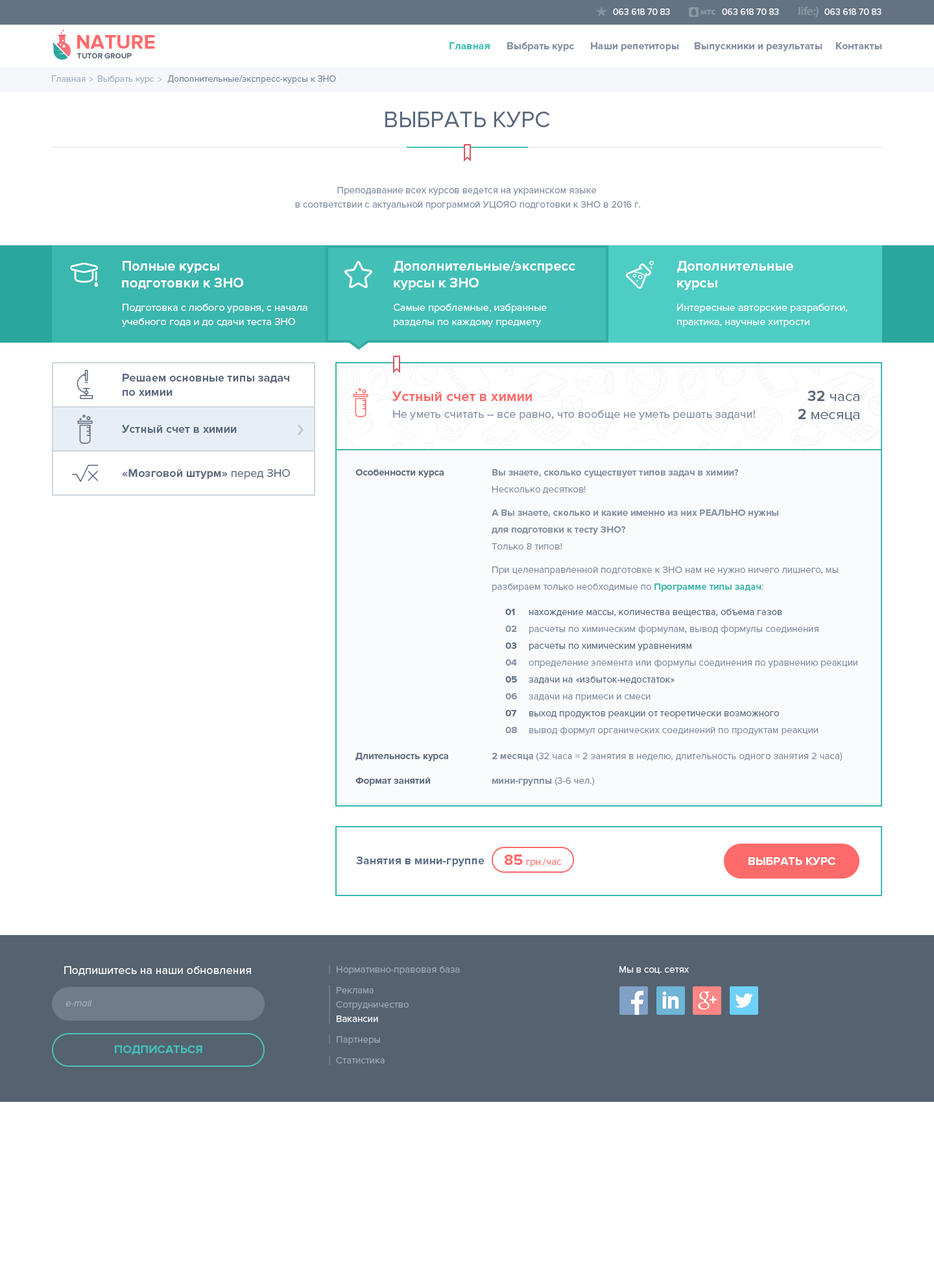
<style>
.page{position:relative;width:934px;height:1277px;background:#ffffff}
.page>*{position:absolute;margin:0}
.t1{font:9.1px "ProximaNova-Regular";color:#ffffff}
.t2{font:20.1px "ProximaNova-Bold";color:#ff6b6b}
.t3{font:7.8px "ProximaNova-Semibold";color:#556270;text-transform:uppercase}
.t4{font:10.4px "ProximaNova-Bold";color:#42c0b7}
.t5{font:10.4px "ProximaNova-Bold";color:#828fa2}
.t6{font:9.1px "ProximaNova-Regular";color:#a8b5c4}
.t7{font:9.1px "ProximaNova-Regular";color:#7d8c9c}
.t8{font:23.4px "ProximaNova-Regular";color:#5a687c;text-transform:uppercase}
.t9{font:9.7px/14.3px "ProximaNova-Regular";color:#828fa2}
.t10{font:14.3px/16.9px "ProximaNova-Bold";color:#ffffff}
.t11{font:10.4px/14.3px "ProximaNova-Regular";color:#ffffff}
.t12{font:11.7px/14.3px "ProximaNova-Bold";color:#5a687c}
.t13{font:11.7px/16.9px "ProximaNova-Regular";color:#828fa2}
.t14{font:14.3px/14.3px "ProximaNova-Bold";color:#ff6b6b}
.t15{font:14.9px "ProximaNova-Regular";color:#5a687c}
.t16{font:14.9px "ProximaNova-Bold";color:#5a687c}
.t17{font:11.7px "ProximaNova-Bold";color:#5a687c}
.t18{font:11.7px "ProximaNova-Regular";color:#5a687c}
.t19{font:9.7px "ProximaNova-Bold";color:#5a687c}
.t20{font:9.7px/23.4px "ProximaNova-Regular";color:#828fa2}
.t21{font:9.7px/16.9px "ProximaNova-Bold";color:#828fa2}
.t22{font:9.7px/16.9px "ProximaNova-Regular";color:#828fa2}
.t23{font:9.7px/23.4px "ProximaNova-Bold";color:#828fa2}
.t24{font:9.7px/16.9px "ProximaNova-Bold";color:#3ab7ae}
.t25{font:9.7px/16.9px "ProximaNova-Bold";color:#556883}
.t26{font:9.7px/16.9px "ProximaNova-Regular";color:#556883}
.t27{font:9.7px "ProximaNova-Regular";color:#828fa2}
.t28{font:9.7px "ProximaNova-Bold";color:#828fa2}
.t29{font:11.7px "ProximaNova-Bold";color:#596c86}
.t30{font:9.7px "ProximaNova-Regular";color:#ff6b6b}
.t31{font:15.6px "ProximaNova-Bold";color:#ff6b6b}
.t32{font:11.7px "ProximaNova-Bold";color:#ffffff}
.t33{font:11.7px "ProximaNova-Regular";color:#ffffff}
.t34{font:9.7px/14.3px "ProximaNova-Regular";color:#9ba9b8}
.t35{font:9.7px/20.8px "ProximaNova-Regular";color:#9ba9b8}
.t36{font:9.7px/14.3px "ProximaNova-Regular";color:#fefeff}
.t37{font:9.7px "ProximaNova-Regular";color:#ffffff}
.t38{font:9.7px "ProximaNova-RegularIt";color:#9faebe}
.t39{font:11.7px "ProximaNova-Bold";color:#42c0b7;text-transform:uppercase}
</style>
<div class="page">
<p class="t1" style="left:613px;top:8px;width:57px;height:7px">063 618 70 83</p>
<p class="t1" style="left:722px;top:8px;width:57px;height:7px">063 618 70 83</p>
<p class="t1" style="left:824px;top:8px;width:58px;height:7px">063 618 70 83</p>
<p class="t2" style="left:77px;top:35px;width:78px;height:14px">NATURE</p>
<p class="t3" style="left:77px;top:53px;width:55px;height:5px">Tutor group</p>
<p class="t4" style="left:450px;top:42px;width:40px;height:7px">Главная</p>
<p class="t5" style="left:507px;top:42px;width:67px;height:9px">Выбрать курс</p>
<p class="t5" style="left:591px;top:42px;width:88px;height:9px">Наши репетиторы</p>
<p class="t5" style="left:695px;top:42px;width:128px;height:9px">Выпускники и результаты</p>
<p class="t5" style="left:836px;top:42px;width:46px;height:7px">Контакты</p>
<p class="t6" style="left:52px;top:75px;width:34px;height:7px">Главная</p>
<p class="t6" style="left:98px;top:75px;width:56px;height:9px">Выбрать курс</p>
<p class="t7" style="left:167px;top:75px;width:169px;height:9px">Дополнительные/экспресс-курсы к ЗНО</p>
<p class="t8" style="left:385px;top:112px;width:165px;height:15px">Выбрать куpс</p>
<p class="t9" style="left:295px;top:187px;width:345px;height:23px;text-align:center">Преподавание всех курсов ведется на украинском языке<br> в соответствии с актуальной программой УЦОЯО подготовки к ЗНО в 2016 г.</p>
<p class="t10" style="left:122px;top:261px;width:121px;height:28px">Полные курсы <br>подготовки к ЗНО</p>
<p class="t10" style="left:394px;top:261px;width:181px;height:29px">Дополнительные/экспресс<br>курсы к ЗНО</p>
<p class="t10" style="left:677px;top:261px;width:116px;height:29px">Дополнительные <br>курсы</p>
<p class="t11" style="left:122px;top:304px;width:185px;height:23px">Подготовка с любого уровня, с начала <br>учебного года и до сдачи теста ЗНО</p>
<p class="t11" style="left:394px;top:304px;width:153px;height:23px">Cамые проблемные, избранные <br>разделы по каждому предмету</p>
<p class="t11" style="left:677px;top:304px;width:171px;height:23px">Интересные авторские разработки, <br>практика, научные хитрости</p>
<p class="t12" style="left:123px;top:374px;width:166px;height:22px">Решаем основные типы задач <br>по химии</p>
<p class="t13" style="left:392px;top:391px;width:363px;height:29px"><span class="t14">Устный счет в химии<br></span>Не уметь считать – все равно, что вообще не уметь решать задачи!</p>
<p class="t15" style="left:808px;top:390px;width:51px;height:11px"><span class="t16">32 </span>часа</p>
<p class="t15" style="left:798px;top:409px;width:61px;height:12px"><span class="t16">2 </span>месяца</p>
<p class="t17" style="left:122px;top:425px;width:115px;height:8px">Устный счет в химии</p>
<p class="t17" style="left:122px;top:469px;width:168px;height:10px">«Мозговой штурм» <span class="t18">перед ЗНО</span></p>
<p class="t19" style="left:355px;top:469px;width:89px;height:8px">Особенности курса</p>
<p class="t20" style="left:492px;top:469px;width:346px;height:123px"><span class="t21">Вы знаете, сколько существует типов задач в химии?<br></span><span class="t22">Несколько десятков!<br></span><span class="t23">А Вы знаете, сколько и какие именно из них РЕАЛЬНО нужны <br></span><span class="t21">для подготовки к тесту ЗНО?<br></span><span class="t22">Только 8 типов!<br></span>При целенаправленной подготовке к ЗНО нам не нужно ничего лишнего, мы <span class="t22">разбираем только необходимые по </span><span class="t24">Программе типы задач</span><span class="t22">:</span></p>
<p class="t22" style="left:505px;top:608px;width:353px;height:127px"><span class="t25">01 </span><span class="t26">нахождение массы, количества вещества, объема газов<br></span><span class="t21">02</span> расчеты по химическим формулам, вывод формулы соединения<br><span class="t25">03 </span><span class="t26">расчеты по химическим уравнениям<br></span><span class="t21">04</span> определение элемента или формулы соединения по уравнению реакции<br><span class="t25">05 </span><span class="t26">задачи на «избыток-недостаток»<br></span><span class="t21">06</span> задачи на примеси и смеси<br><span class="t25">07 </span><span class="t26">выход продуктов реакции от теоретически возможного<br></span><span class="t21">08</span> вывод формул органических соединений по продуктам реакции</p>
<p class="t19" style="left:355px;top:752px;width:93px;height:9px">Длительность курса</p>
<p class="t27" style="left:492px;top:752px;width:350px;height:9px"><span class="t28">2 месяца </span>(32 часа = 2 занятия в неделю, длительность одного занятия 2 часа)</p>
<p class="t19" style="left:355px;top:777px;width:76px;height:9px">Формат занятий</p>
<p class="t28" style="left:492px;top:776px;width:102px;height:10px">мини-группы <span class="t27">(3-6 чел.)</span></p>
<p class="t29" style="left:356px;top:856px;width:129px;height:10px">Занятия в мини-группе</p>
<p class="t30" style="left:505px;top:854px;width:56px;height:13px"><span class="t31">85 </span>грн./час</p>
<p class="t32" style="left:749px;top:857px;width:86px;height:8px">ВЫБРАТЬ КУРС</p>
<p class="t33" style="left:64px;top:966px;width:187px;height:10px">Подпишитесь на наши обновления</p>
<p class="t34" style="left:336px;top:966px;width:124px;height:97px">Нормативно-правовая база<br><span class="t35">Реклама<br></span>Cотрудничество<br><span class="t36">Вакансии <br></span><span class="t35">Партнеры<br>Статистика</span></p>
<p class="t37" style="left:619px;top:966px;width:70px;height:8px">Мы в соц. сетях</p>
<p class="t38" style="left:66px;top:1000px;width:26px;height:6px">e-mail</p>
<p class="t39" style="left:115px;top:1045px;width:87px;height:10px">Подписаться</p>
</div>
